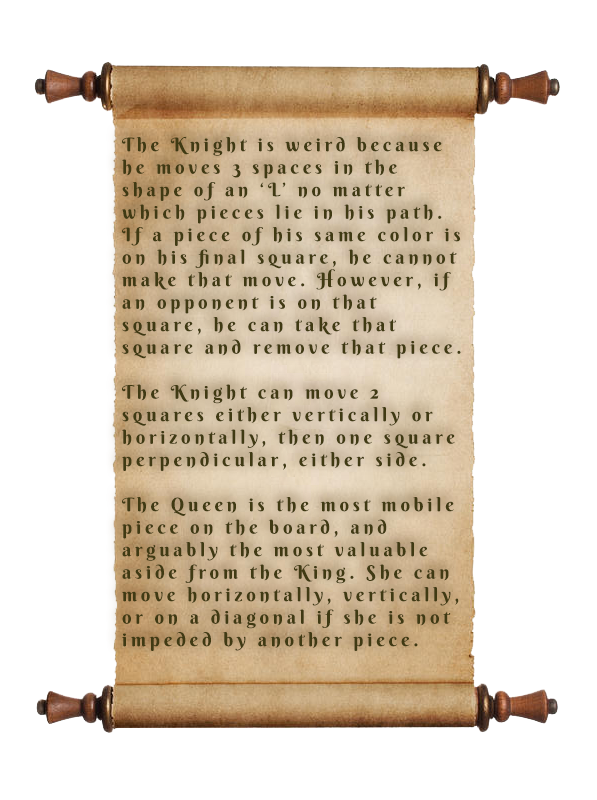
<style>
.page{position:relative;width:597px;height:800px;background:#ffffff}
.page>*{position:absolute;margin:0}
.t1{font:18.8px "BerkshireSwash-Regular";letter-spacing:0.2em;color:#403a13}
</style>
<div class="page">
<p class="t1" style="left:121px;top:137px;width:340px;height:514px">The Knight is weird because he moves 3 spaces in the shape of an ‘L’ no matter which pieces lie in his path. If a piece of his same color is on his final square, he cannot make that move. However, if an opponent is on that square, he can take that square and remove that piece.<br><br>The Knight can move 2 squares either vertically or horizontally, then one square perpendicular, either side.<br><br>The Queen is the most mobile piece on the board, and arguably the most valuable aside from the King. She can move horizontally, vertically, or on a diagonal if she is not impeded by another piece.</p>
</div>
